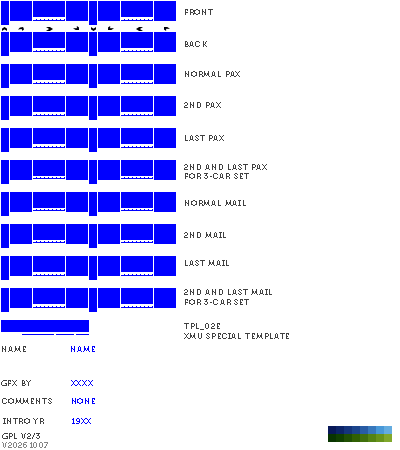
<style>
.page{position:relative;width:400px;height:450px;background:#ffffff}
.page>*{position:absolute;margin:0}
.t1{font:8px "Museo700-Regular";letter-spacing:0.075em;color:#404040;text-transform:uppercase}
.t2{font:8px "Museo700-Regular";letter-spacing:0.075em;color:#0000ff;text-transform:uppercase}
.t3{font:8px "Museo700-Regular";letter-spacing:0.075em;color:#848484;text-transform:uppercase}
</style>
<div class="page">
<p class="t1" style="left:185px;top:9px;width:28px;height:6px">front</p>
<p class="t1" style="left:185px;top:41px;width:22px;height:6px">back</p>
<p class="t1" style="left:185px;top:71px;width:55px;height:6px">normal pax</p>
<p class="t1" style="left:184px;top:102px;width:37px;height:6px">2nd pax</p>
<p class="t1" style="left:185px;top:135px;width:39px;height:6px">last pax</p>
<p class="t1" style="left:184px;top:164px;width:83px;height:15px">2nd and last pax<br>for 3-car set</p>
<p class="t1" style="left:185px;top:200px;width:61px;height:6px">normal mail</p>
<p class="t1" style="left:184px;top:232px;width:42px;height:6px">2nd mail</p>
<p class="t1" style="left:185px;top:260px;width:44px;height:6px">last mail</p>
<p class="t1" style="left:184px;top:289px;width:88px;height:16px">2nd and last mail<br>for 3-car set</p>
<p class="t1" style="left:184px;top:323px;width:105px;height:16px">tpl_02e<br>xmu special template</p>
<p class="t1" style="left:2px;top:346px;width:24px;height:6px">name</p>
<p class="t2" style="left:71px;top:346px;width:24px;height:6px">name</p>
<p class="t1" style="left:1px;top:380px;width:30px;height:6px">gfx by</p>
<p class="t2" style="left:71px;top:380px;width:22px;height:6px">xxxx</p>
<p class="t1" style="left:2px;top:398px;width:50px;height:6px">comments</p>
<p class="t2" style="left:72px;top:398px;width:23px;height:6px">none</p>
<p class="t1" style="left:3px;top:418px;width:41px;height:6px">intro yr</p>
<p class="t2" style="left:72px;top:418px;width:19px;height:6px">19xx</p>
<p class="t1" style="left:2px;top:433px;width:38px;height:6px">gpl v2/3</p>
<p class="t3" style="left:2px;top:442px;width:46px;height:6px">v20261007</p>
</div>
